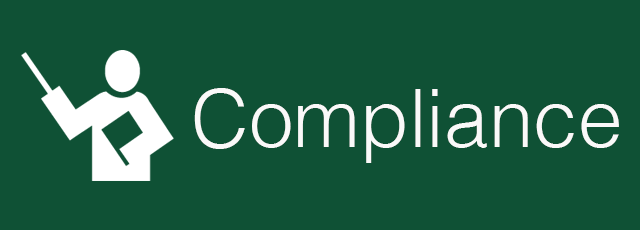
<style>
.page{position:relative;width:640px;height:230px;background:#0f5135}
.page>*{position:absolute;margin:0}
.t1{font:80px "Helvetica-Light";color:#faf9f9}
</style>
<div class="page">
<p class="t1" style="left:194px;top:88px;width:425px;height:75px">Compliance</p>
</div>
